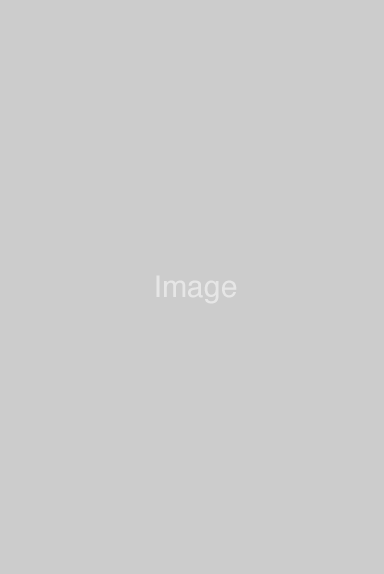
<style>
.page{position:relative;width:384px;height:574px;background:#cccccc}
.page>*{position:absolute;margin:0}
.t1{font:30px "Helvetica";letter-spacing:0.005em;color:#e6e6e6}
</style>
<div class="page">
<p class="t1" style="left:156px;top:275px;width:81px;height:29px">Image</p>
</div>
